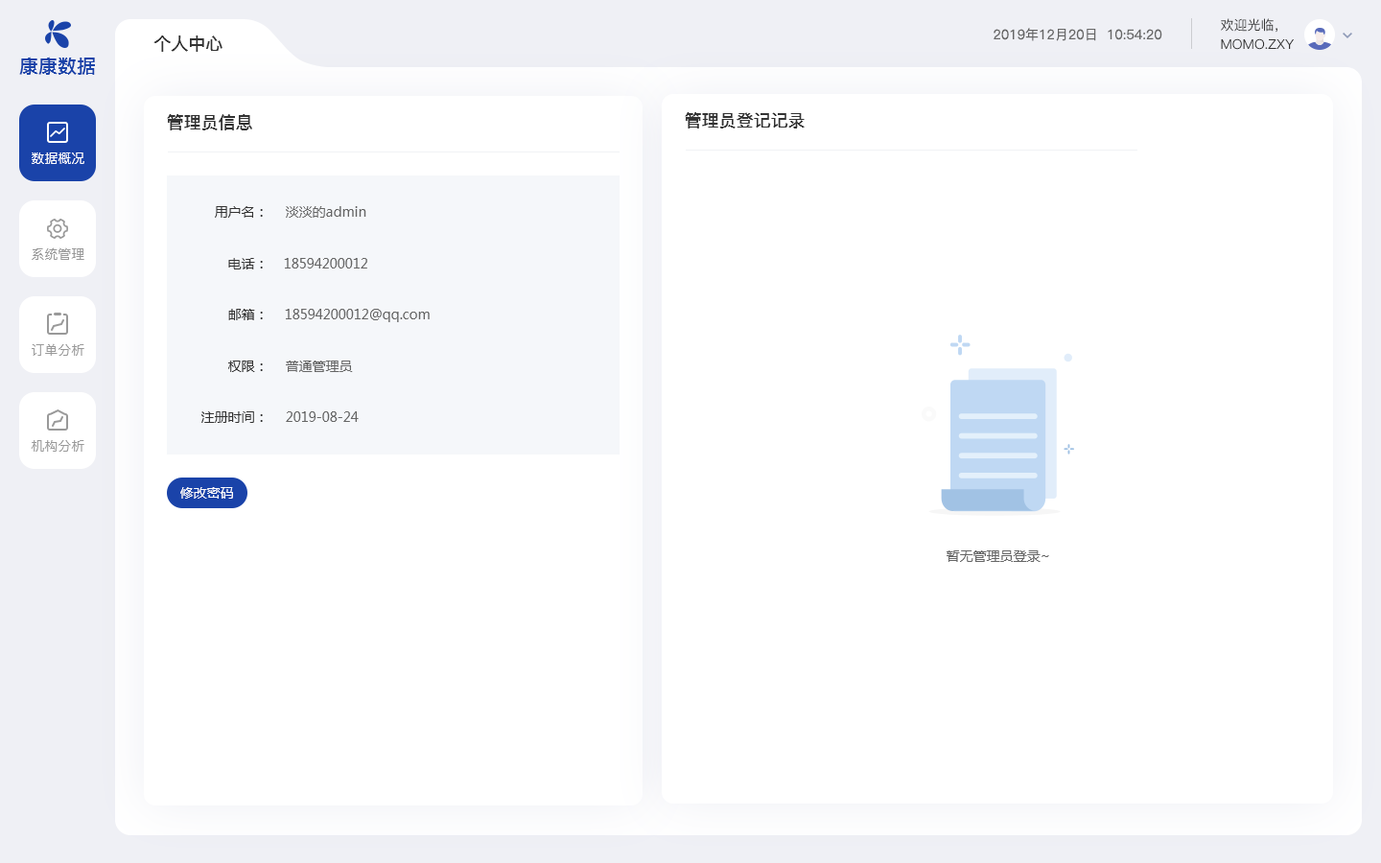
<style>
.page{position:relative;width:1381px;height:863px;background:#ffffff}
.page>*{position:absolute;margin:0}
.t1{font:13.4px "PingFang-SC-Regular";color:#666666}
.t2{font:13.4px "PingFang-SC-Medium";color:#333333;text-transform:uppercase}
.t3{font:17.3px "PingFang-SC-Bold";color:#333333;text-transform:uppercase}
.t4{font:19.2px "PingFangSC-Medium";color:#1a43a9;text-transform:uppercase}
.t5{font:17.3px "PingFang-SC-Bold";color:#333333}
.t6{font:13.4px "PingFang-SC-Medium";color:#ffffff;text-transform:uppercase}
.t7{font:13.4px "MicrosoftYaHei";color:#333333}
.t8{font:13.4px "MicrosoftYaHei";color:#666666}
.t9{font:13.4px "PingFang-SC-Medium";color:#999999;text-transform:uppercase}
.t10{font:13.4px "MicrosoftYaHei";color:#fefefe}
</style>
<div class="page">
<p class="t1" style="left:994px;top:28px;width:169px;height:13px">2019年12月20日  10:54:20</p>
<p class="t2" style="left:1221px;top:18px;width:57px;height:15px">欢迎光临，</p>
<p class="t3" style="left:153px;top:35px;width:70px;height:17px">个人中心</p>
<p class="t2" style="left:1221px;top:38px;width:73px;height:12px">momo.zxy</p>
<p class="t4" style="left:19px;top:57px;width:76px;height:18px">康康数据</p>
<p class="t5" style="left:685px;top:112px;width:120px;height:17px">管理员登记记录</p>
<p class="t5" style="left:167px;top:114px;width:85px;height:16px">管理员信息</p>
<p class="t6" style="left:32px;top:153px;width:52px;height:11px">数据概况</p>
<p class="t7" style="left:215px;top:206px;width:48px;height:12px">用户名：</p>
<p class="t8" style="left:286px;top:206px;width:80px;height:12px">淡淡的admin</p>
<p class="t9" style="left:32px;top:247px;width:52px;height:13px">系统管理</p>
<p class="t7" style="left:228px;top:258px;width:35px;height:12px">电话：</p>
<p class="t8" style="left:284px;top:258px;width:83px;height:11px">18594200012</p>
<p class="t7" style="left:228px;top:309px;width:35px;height:11px">邮箱：</p>
<p class="t8" style="left:285px;top:309px;width:145px;height:13px">18594200012@qq.com</p>
<p class="t9" style="left:32px;top:343px;width:52px;height:13px">订单分析</p>
<p class="t7" style="left:228px;top:361px;width:35px;height:11px">权限：</p>
<p class="t8" style="left:286px;top:361px;width:67px;height:11px">普通管理员</p>
<p class="t7" style="left:201px;top:412px;width:62px;height:11px">注册时间：</p>
<p class="t8" style="left:286px;top:412px;width:73px;height:10px">2019-08-24</p>
<p class="t9" style="left:31px;top:440px;width:53px;height:12px">机构分析</p>
<p class="t10" style="left:180px;top:487px;width:53px;height:12px">修改密码</p>
<p class="t8" style="left:947px;top:551px;width:102px;height:11px">暂无管理员登录~</p>
</div>
